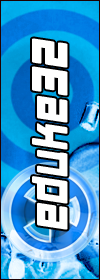
<style>
.page{position:relative;width:100px;height:280px}
.page>*{position:absolute;margin:0}
.t1{font:48px "DaidohRemixRound";color:#fffffe;scale:0.68 1}
</style>
<div class="page">
<p class="t1" style="left:32px;top:38px;width:36px;height:192px;rotate:-90deg">eduke32</p>
</div>
